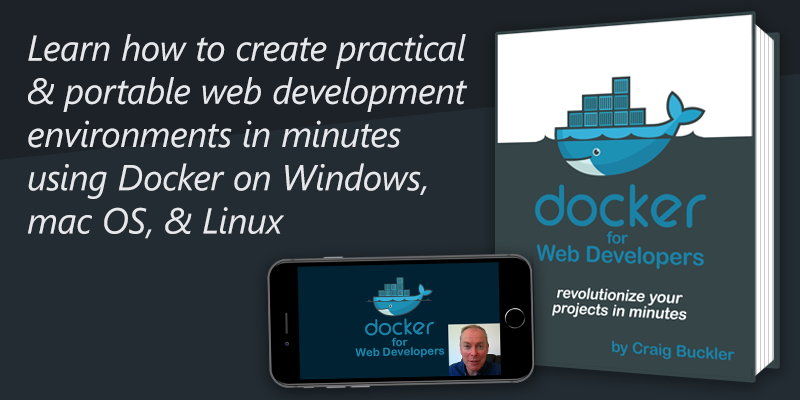
<style>
.page{position:relative;width:800px;height:400px;background:#232c33}
.page>*{position:absolute;margin:0}
.t1{font:36px "SegoeUI-Italic";color:#e7e8eb}
</style>
<div class="page">
<p class="t1" style="left:28px;top:34px;width:440px;height:205px">Learn how to create practical &amp; portable web development environments in minutes using Docker on Windows, mac OS, &amp; Linux</p>
</div>
